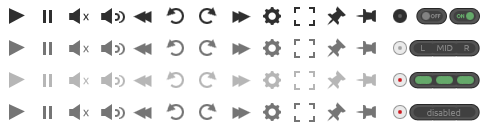
<style>
.page{position:relative;width:480px;height:128px;background:#ffffff}
.page>*{position:absolute;margin:0}
.t1{font:5.3px "Ubuntu";color:#828282}
.t2{font:5.3px "Ubuntu";color:#65a96a}
.t3{font:8.9px "Ubuntu";color:#828282}
</style>
<div class="page">
<p class="t1" style="left:430px;top:14px;width:11px;height:5px">OFF</p>
<p class="t2" style="left:456px;top:14px;width:9px;height:5px">ON</p>
<p class="t3" style="left:421px;top:45px;width:4px;height:6px">L</p>
<p class="t3" style="left:437px;top:45px;width:16px;height:6px">MID</p>
<p class="t3" style="left:464px;top:45px;width:6px;height:6px">R</p>
<p class="t3" style="left:427px;top:109px;width:34px;height:7px">disabled</p>
</div>
